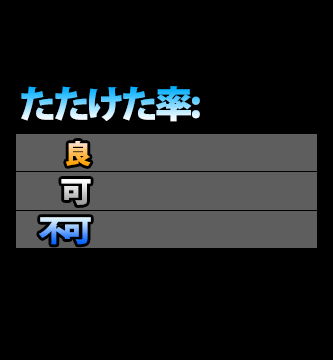
<style>
.page{position:relative;width:333px;height:360px;background:#000000}
.page>*{position:absolute;margin:0}
.t1{font:36.9px "KozGoPr6N-Heavy";letter-spacing:-0.04em}
.t2{font:25.9px "KozGoPr6N-Heavy";letter-spacing:-0.04em}
.t3{font:29px "KozGoPr6N-Heavy";letter-spacing:-0.025em;scale:1.09 1}
.t4{font:30.4px "KozGoPr6N-Heavy";letter-spacing:-0.24em}
</style>
<div class="page">
<p class="t1" style="left:21px;top:86px;width:179px;height:36px">たたけた率:</p>
<p class="t2" style="left:66px;top:141px;width:25px;height:25px">良</p>
<p class="t3" style="left:61px;top:179px;width:30px;height:26px">可</p>
<p class="t4" style="left:39px;top:217px;width:52px;height:28px">不可</p>
</div>
